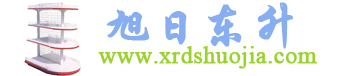
<style>
.page{position:relative;width:346px;height:76px;background:#ffffff}
.page>*{position:absolute;margin:0}
.t1{font:48px "STXingkai";color:#87aef1;font-weight:bold}
.t2{font:24px "IskoolaPota";color:#9ad32c;font-weight:bold}
</style>
<div class="page">
<p class="t1" style="left:106px;top:2px;width:187px;height:47px">旭日东升</p>
<p class="t2" style="left:98px;top:46px;width:219px;height:23px">www.xrdshuojia.com</p>
</div>
